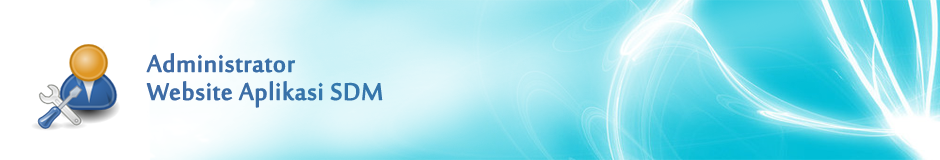
<style>
.page{position:relative;width:940px;height:160px}
.page>*{position:absolute;margin:0}
.t1{font:32.4px/14px "SakkalMajalla";color:#3e6aa4;font-weight:bold}
</style>
<div class="page">
<p class="t1" style="left:146px;top:53px;width:237px;height:55px">Administrator <br><br>Website Aplikasi SDM</p>
</div>
